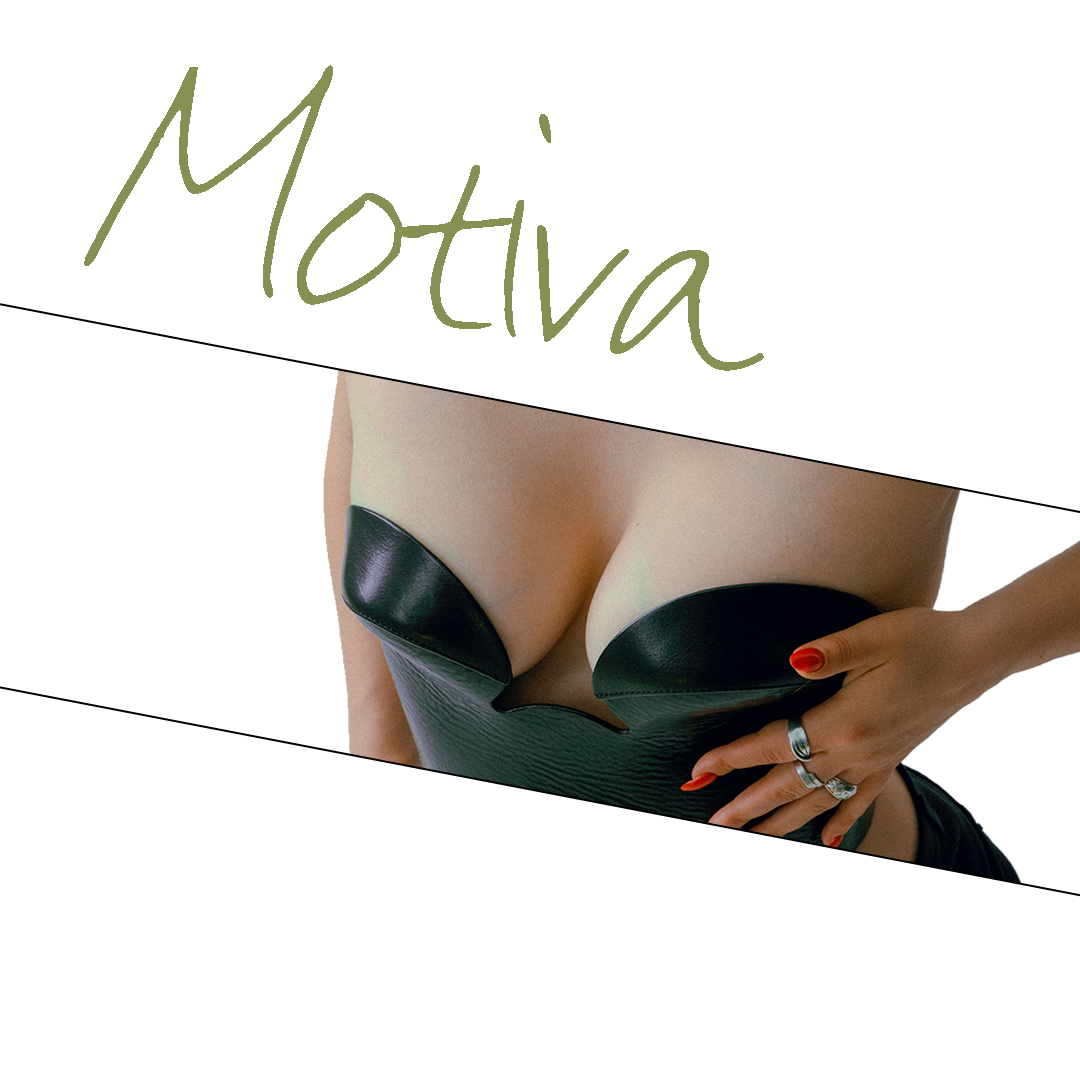
<style>
.page{position:relative;width:1080px;height:1080px;background:#ffffff}
.page>*{position:absolute;margin:0}
.t1{font:366.7px "NanumEongGeongKwiCe";letter-spacing:-0.04em;color:#859152}
</style>
<div class="page">
<p class="t1" style="left:84px;top:65px;width:680px;height:306px;rotate:9deg">Motiva</p>
</div>
